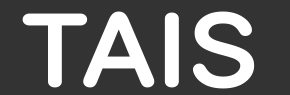
<style>
.page{position:relative;width:290px;height:95px;background:#333333}
.page>*{position:absolute;margin:0}
.t1{font:100px "TTRoundsNeue-Medium";color:#ffffff;font-weight:bold;scale:1.1 1}
</style>
<div class="page">
<p class="t1" style="left:22px;top:11px;width:233px;height:78px">TAIS</p>
</div>
